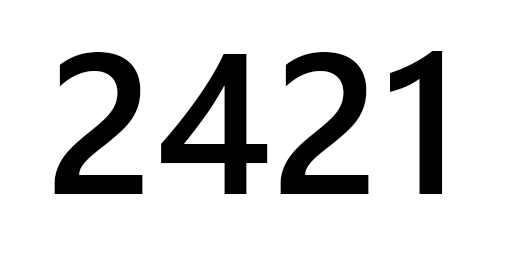
<style>
.page{position:relative;width:512px;height:256px;background:#ffffff}
.page>*{position:absolute;margin:0}
.t1{font:200px "YuGothicUI-Bold";color:#000000}
</style>
<div class="page">
<p class="t1" style="left:54px;top:51px;width:389px;height:143px">2421</p>
</div>
